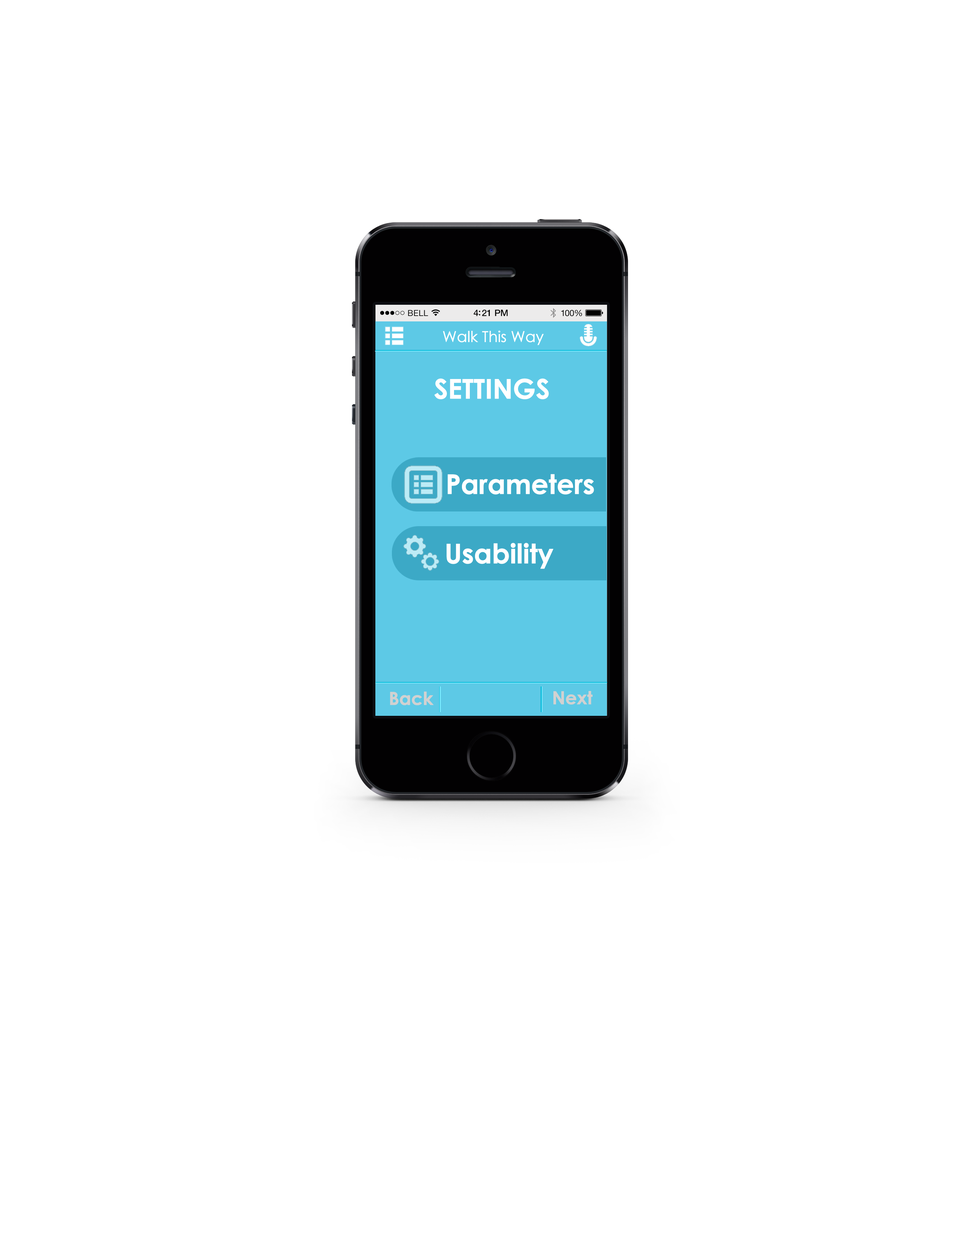
<style>
.page{position:relative;width:960px;height:1242px;background:#ffffff}
.page>*{position:absolute;margin:0}
.t1{font:15.1px "CenturyGothic";letter-spacing:-0.025em;color:#ffffff;font-weight:bold}
.t2{font:27.1px "CenturyGothic-Bold";letter-spacing:-0.025em;color:#ffffff;font-weight:bold}
.t3{font:18.1px "CenturyGothic-Bold";letter-spacing:-0.025em;color:#d1d1d1;font-weight:bold}
</style>
<div class="page">
<p class="t1" style="left:443px;top:331px;width:101px;height:14px">Walk This Way</p>
<p class="t2" style="left:434px;top:378px;width:115px;height:21px">SETTINGS</p>
<p class="t2" style="left:448px;top:474px;width:146px;height:21px">Parameters</p>
<p class="t2" style="left:446px;top:543px;width:107px;height:26px">Usability</p>
<p class="t3" style="left:390px;top:692px;width:44px;height:13px">Back</p>
<p class="t3" style="left:553px;top:691px;width:40px;height:14px">Next</p>
</div>
